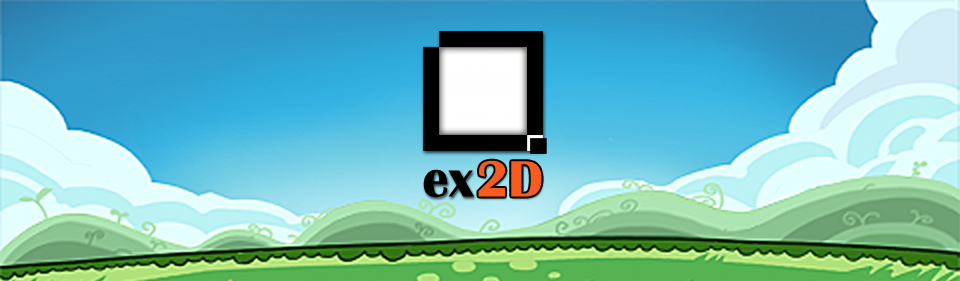
<style>
.page{position:relative;width:960px;height:281px}
.page>*{position:absolute;margin:0}
.t1{font:53px "BritannicBold";color:#ff4800}
.t2{font:53px "BritannicBold";color:#000000}
</style>
<div class="page">
<p class="t1" style="left:478px;top:160px;width:64px;height:37px">2D</p>
<p class="t2" style="left:423px;top:169px;width:51px;height:28px">ex</p>
</div>
